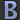
<style>
.page{position:relative;width:20px;height:20px;background:#333333}
.page>*{position:absolute;margin:0}
.t1{font:25px "LucidaGrande-Bold";letter-spacing:-0.025em}
</style>
<div class="page">
<p class="t1" style="left:4px;top:1px;width:14px;height:18px">B</p>
</div>
